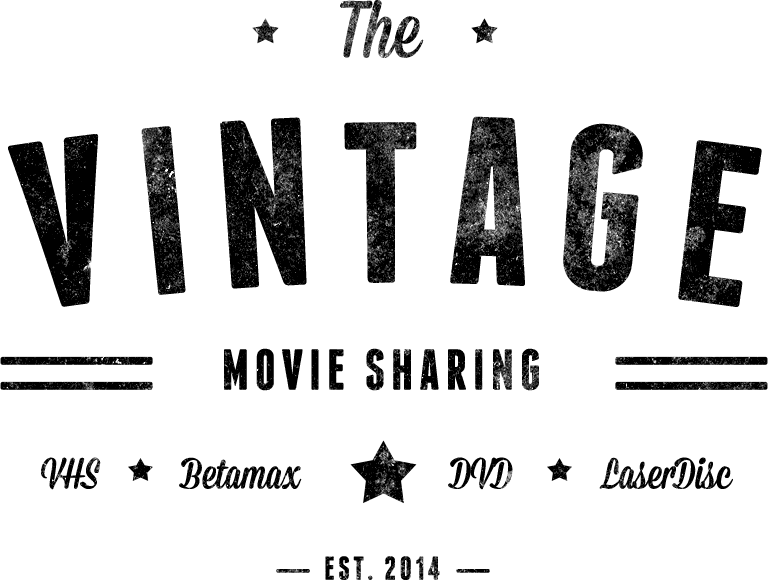
<style>
.page{position:relative;width:768px;height:580px;background:#ffffff}
.page>*{position:absolute;margin:0}
.t1{font:80.2px "Mission-Script"}
.t2{font:236.4px "Franchise-Bold";letter-spacing:0.1em;color:#000000;text-transform:uppercase}
.t3{font:57.7px "Franchise-Bold";letter-spacing:0.1em;color:#000000;text-transform:uppercase}
.t4{font:43.5px "Mission-Script";color:#000000}
.t5{font:33px "Franchise-Bold";letter-spacing:0.1em;text-transform:uppercase}
</style>
<div class="page">
<p class="t1" style="left:340px;top:0px;width:84px;height:58px">The</p>
<p class="t2" style="left:8px;top:116px;width:754px;height:191px">VINTAGE</p>
<p class="t3" style="left:224px;top:348px;width:315px;height:43px">movie sharing</p>
<p class="t4" style="left:41px;top:457px;width:261px;height:33px">VHS         Betamax</p>
<p class="t4" style="left:448px;top:457px;width:285px;height:33px">DVD          LaserDisc</p>
<p class="t5" style="left:325px;top:556px;width:115px;height:24px">Est. 2014</p>
</div>
